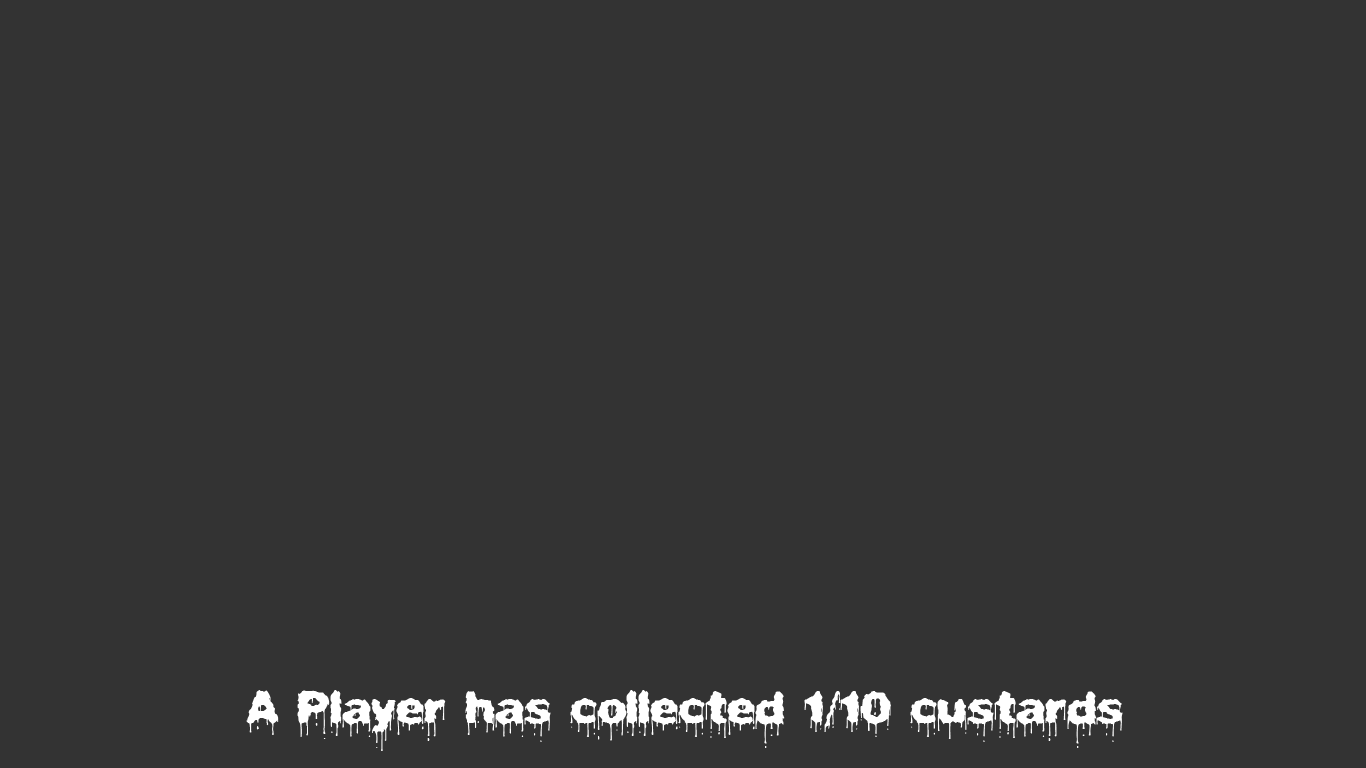
<style>
.page{position:relative;width:1366px;height:768px;background:#333333}
.page>*{position:absolute;margin:0}
.t1{font:48px "PlasmaDrip(BRK)";color:#ffffff}
</style>
<div class="page">
<p class="t1" style="left:246px;top:690px;width:877px;height:61px">A Player has collected 1/10 custards</p>
</div>
